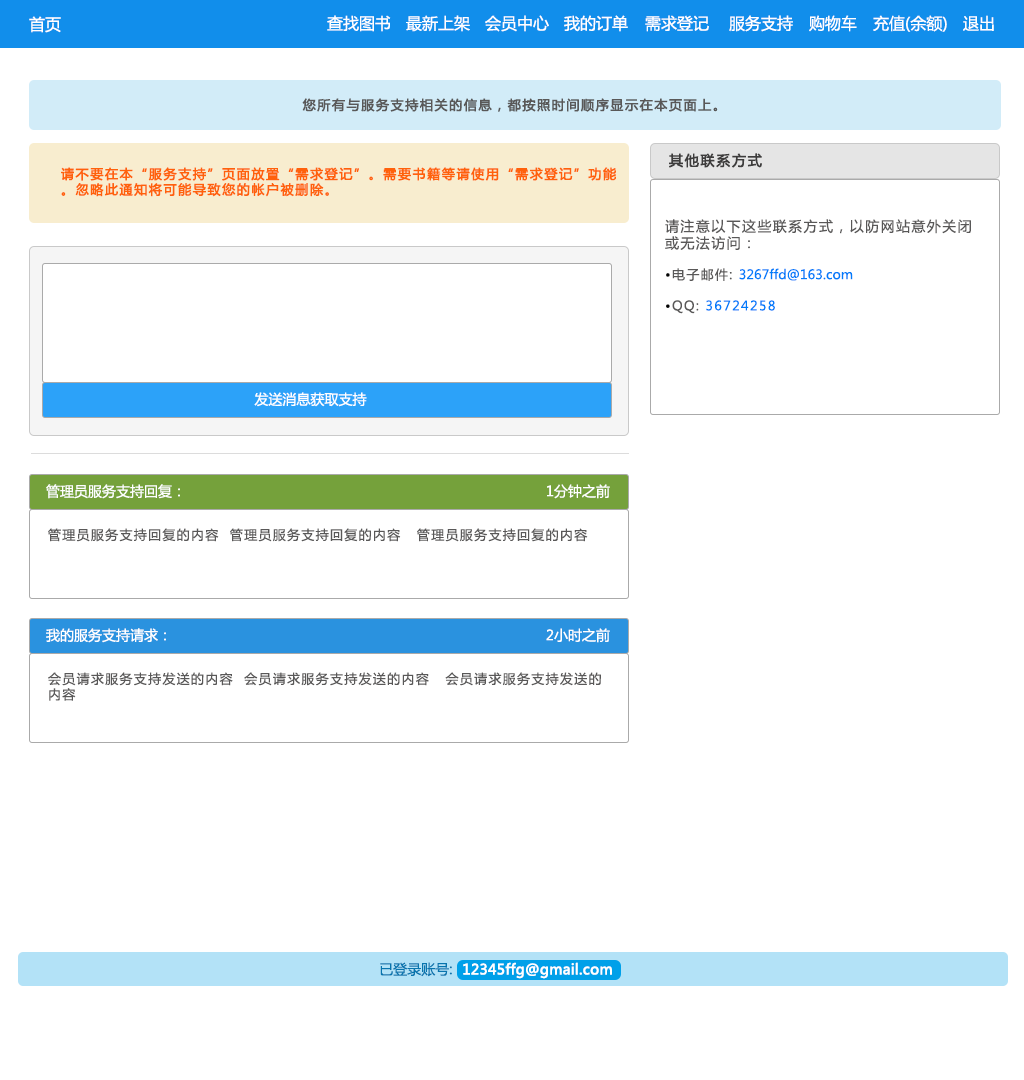
<style>
.page{position:relative;width:1024px;height:1080px;background:#ffffff}
.page>*{position:absolute;margin:0}
.t1{font:16px "MicrosoftYaHei";color:#ffffff}
.t2{font:13px "MicrosoftYaHei";letter-spacing:0.1em;color:#595858;font-weight:bold}
.t3{font:14px "MicrosoftYaHei";letter-spacing:0.1em;color:#3d3c3c;font-weight:bold}
.t4{font:13px "MicrosoftYaHei";letter-spacing:0.1em;color:#fe610b;font-weight:bold}
.t5{font:14px "MicrosoftYaHei";letter-spacing:0.1em;color:#595858}
.t6{font:13px "MicrosoftYaHei";letter-spacing:0.1em;color:#020202}
.t7{font:13px "MicrosoftYaHei";letter-spacing:0.1em;color:#595858}
.t8{font:13px "MicrosoftYaHei";color:#017cfa}
.t9{font:13px "MicrosoftYaHei";letter-spacing:0.1em;color:#017cfa}
.t10{font:14px "MicrosoftYaHei";color:#ffffff}
.t11{font:14px "MicrosoftYaHei";color:#0875ae}
.t12{font:14px "MicrosoftYaHei";color:#ffffff;font-weight:bold}
</style>
<div class="page">
<p class="t1" style="left:29px;top:16px;width:32px;height:17px">首页</p>
<p class="t1" style="left:327px;top:15px;width:64px;height:17px">查找图书</p>
<p class="t1" style="left:406px;top:15px;width:64px;height:17px">最新上架</p>
<p class="t1" style="left:485px;top:15px;width:64px;height:17px">会员中心</p>
<p class="t1" style="left:564px;top:15px;width:64px;height:17px">我的订单</p>
<p class="t1" style="left:645px;top:15px;width:64px;height:17px">需求登记</p>
<p class="t1" style="left:729px;top:15px;width:64px;height:17px">服务支持</p>
<p class="t1" style="left:809px;top:15px;width:48px;height:17px">购物车</p>
<p class="t1" style="left:873px;top:15px;width:74px;height:17px">充值(余额)</p>
<p class="t1" style="left:963px;top:15px;width:31px;height:16px">退出</p>
<p class="t2" style="left:302px;top:98px;width:416px;height:14px">您所有与服务支持相关的信息，都按照时间顺序显示在本页面上。</p>
<p class="t3" style="left:669px;top:153px;width:93px;height:15px">其他联系方式</p>
<p class="t4" style="left:61px;top:167px;width:555px;height:30px">请不要在本“服务支持”页面放置“需求登记”。需要书籍等请使用“需求登记”功能。忽略此通知将可能导致您的帐户被删除。</p>
<p class="t5" style="left:665px;top:219px;width:306px;height:95px">请注意以下这些联系方式，以防网站意外关闭或无法访问：<br><br><span class="t6">•</span><span class="t7">电子邮件: </span><span class="t8">3267ffd@163.com<br><br></span><span class="t6">•</span><span class="t7">QQ: </span><span class="t9">36724258</span></p>
<p class="t10" style="left:254px;top:392px;width:113px;height:15px">发送消息获取支持</p>
<p class="t10" style="left:46px;top:484px;width:134px;height:15px">管理员服务支持回复：</p>
<p class="t10" style="left:547px;top:484px;width:63px;height:15px">1分钟之前</p>
<p class="t7" style="left:48px;top:528px;width:540px;height:14px">管理员服务支持回复的内容  管理员服务支持回复的内容   管理员服务支持回复的内容</p>
<p class="t10" style="left:46px;top:628px;width:120px;height:15px">我的服务支持请求：</p>
<p class="t10" style="left:546px;top:628px;width:64px;height:15px">2小时之前</p>
<p class="t7" style="left:48px;top:672px;width:553px;height:29px">会员请求服务支持发送的内容  会员请求服务支持发送的内容   会员请求服务支持发送的内容</p>
<p class="t11" style="left:380px;top:962px;width:72px;height:15px">已登录账号:</p>
<p class="t12" style="left:463px;top:962px;width:149px;height:17px">12345ffg@gmail.com</p>
</div>
